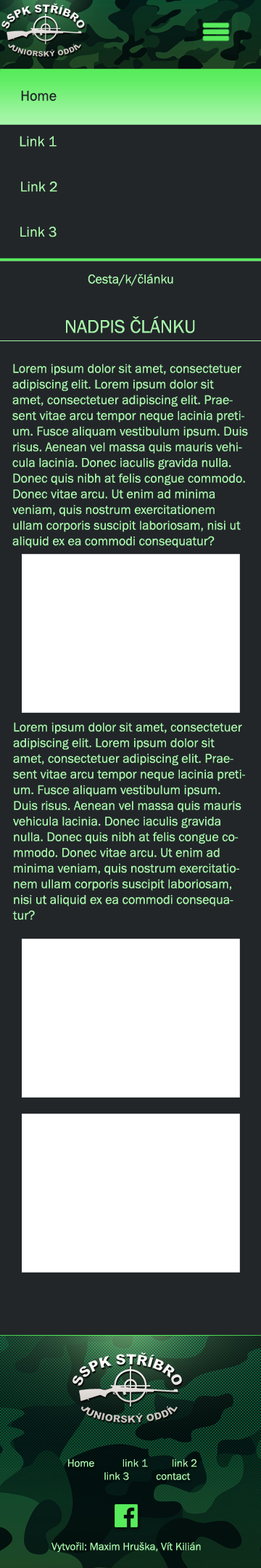
<style>
.page{position:relative;width:261px;height:1568px;background:#222629}
.page>*{position:absolute;margin:0}
.t1{font:14.5px "FranklinGothic-Book";color:#222629}
.t2{font:14.5px "FranklinGothic-Book";color:#a8f6aa}
.t3{font:13.1px "FranklinGothic-Book";color:#a8f6aa}
.t4{font:18.9px "FranklinGothic-Book";color:#a8f6aa}
.t5{font:10.9px "FranklinGothic-Book";color:#a8f6aa}
</style>
<div class="page">
<p class="t1" style="left:21px;top:91px;width:36px;height:10px">Home</p>
<p class="t2" style="left:20px;top:136px;width:37px;height:11px">Link 1</p>
<p class="t2" style="left:21px;top:181px;width:36px;height:11px">Link 2</p>
<p class="t2" style="left:20px;top:226px;width:37px;height:11px">Link 3</p>
<p class="t3" style="left:88px;top:274px;width:85px;height:12px">Cesta/k/článku</p>
<p class="t4" style="left:66px;top:316px;width:129px;height:17px">NADPIS ČLÁNKU</p>
<p class="t3" style="left:12px;top:364px;width:236px;height:184px">Lorem ipsum dolor sit amet, consectetuer adipiscing elit. Lorem ipsum dolor sit amet, consectetuer adipiscing elit. Praesent vitae arcu tempor neque lacinia pretium. Fusce aliquam vestibulum ipsum. Duis risus. Aenean vel massa quis mauris vehicula lacinia. Donec iaculis gravida nulla. Donec quis nibh at felis congue commodo. Donec vitae arcu. Ut enim ad minima veniam, quis nostrum exercitationem ullam corporis suscipit laboriosam, nisi ut aliquid ex ea commodi consequatur?</p>
<p class="t3" style="left:12px;top:722px;width:233px;height:198px">Lorem ipsum dolor sit amet, consectetuer adipiscing elit. Lorem ipsum dolor sit amet, consectetuer adipiscing elit. Praesent vitae arcu tempor neque lacinia pretium. Fusce aliquam vestibulum ipsum. Duis risus. Aenean vel massa quis mauris vehicula lacinia. Donec iaculis gravida nulla. Donec quis nibh at felis congue commodo. Donec vitae arcu. Ut enim ad minima veniam, quis nostrum exercitationem ullam corporis suscipit laboriosam, nisi ut aliquid ex ea commodi consequatur?</p>
<p class="t5" style="left:68px;top:1459px;width:129px;height:21px;text-align:center">Home  link 1  link 2   <br>link 3  contact</p>
<p class="t5" style="left:52px;top:1542px;width:149px;height:10px">Vytvořil: Maxim Hruška, Vít Kilián</p>
</div>
